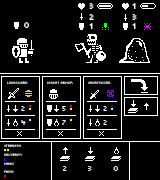
<style>
.page{position:relative;width:160px;height:180px;background:#000000}
.page>*{position:absolute;margin:0}
.t1{font:12px "MunroSmall";letter-spacing:0.011em;color:#ffffff}
.t2{font:4.7px "MunroSmall";letter-spacing:0.011em;color:#ffffff}
.t3{font:4.7px "MunroSmall";letter-spacing:0.011em}
.t4{font:10px "MunroSmall";letter-spacing:0.011em;color:#ffffff}
</style>
<div class="page">
<p class="t1" style="left:89px;top:3px;width:5px;height:6px">3</p>
<p class="t1" style="left:132px;top:3px;width:4px;height:6px">1</p>
<p class="t1" style="left:89px;top:14px;width:5px;height:6px">2</p>
<p class="t1" style="left:132px;top:14px;width:5px;height:6px">3</p>
<p class="t1" style="left:24px;top:22px;width:5px;height:6px">0</p>
<p class="t1" style="left:89px;top:23px;width:4px;height:6px">1</p>
<p class="t1" style="left:132px;top:23px;width:4px;height:6px">1</p>
<p class="t2" style="left:7px;top:81px;width:21px;height:3px">Longsword</p>
<p class="t2" style="left:47px;top:81px;width:26px;height:3px">Knight Armor</p>
<p class="t3" style="left:88px;top:81px;width:23px;height:3px">Shortsword</p>
<p class="t4" style="left:21px;top:106px;width:4px;height:5px">2</p>
<p class="t4" style="left:62px;top:106px;width:4px;height:5px">5</p>
<p class="t4" style="left:103px;top:106px;width:4px;height:5px">2</p>
<p class="t4" style="left:21px;top:120px;width:5px;height:5px">4</p>
<p class="t4" style="left:62px;top:120px;width:4px;height:5px">7</p>
<p class="t4" style="left:103px;top:120px;width:4px;height:5px">2</p>
<p class="t2" style="left:4px;top:144px;width:17px;height:3px">strength</p>
<p class="t2" style="left:4px;top:153px;width:19px;height:3px">dexterity</p>
<p class="t3" style="left:4px;top:162px;width:10px;height:3px">Magic</p>
<p class="t3" style="left:4px;top:170px;width:10px;height:3px">Faith</p>
<p class="t4" style="left:63px;top:166px;width:4px;height:5px">2</p>
<p class="t4" style="left:88px;top:166px;width:4px;height:5px">3</p>
<p class="t4" style="left:113px;top:166px;width:5px;height:5px">0</p>
</div>
